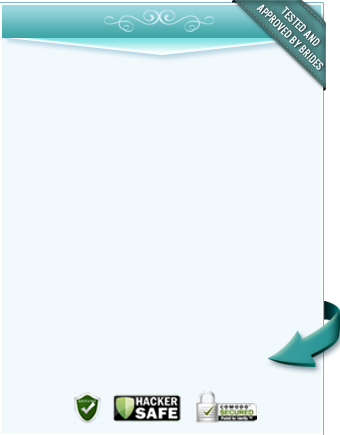
<style>
.page{position:relative;width:340px;height:435px;background:#f2f9fc}
.page>*{position:absolute;margin:0}
.t1{font:12px "U.S.101";letter-spacing:0.02em;color:#ffffff;text-transform:uppercase}
</style>
<div class="page">
<p class="t1" style="left:256px;top:4px;width:68px;height:66px;text-align:center;rotate:45deg">Tested and<br>approved by brides</p>
</div>
